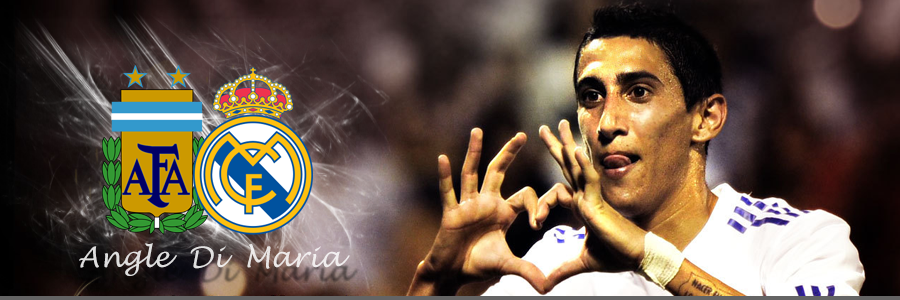
<style>
.page{position:relative;width:900px;height:300px}
.page>*{position:absolute;margin:0}
.t1{font:28px "LucidaHandwriting-Italic";color:#e1e0e0}
</style>
<div class="page">
<p class="t1" style="left:79px;top:243px;width:271px;height:33px">Angle  Di  Maria</p>
</div>
